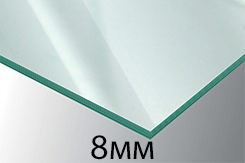
<style>
.page{position:relative;width:245px;height:163px}
.page>*{position:absolute;margin:0}
.t1{font:36px "MyriadPro-Regular";color:#000000}
</style>
<div class="page">
<p class="t1" style="left:91px;top:135px;width:63px;height:25px">8мм</p>
</div>
